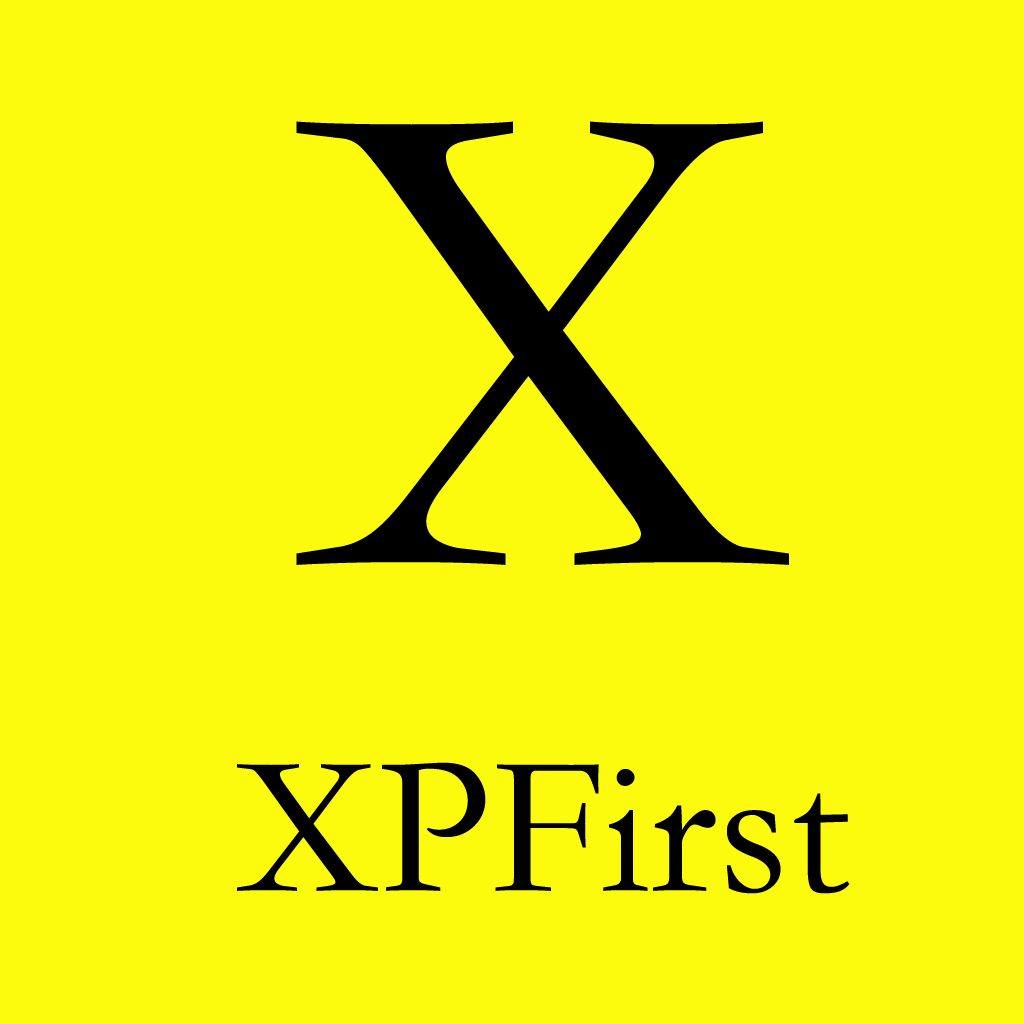
<style>
.page{position:relative;width:1024px;height:1024px;background:#fcfa0d}
.page>*{position:absolute;margin:0}
.t1{font:700px "STFangsong";color:#000000}
.t2{font:200px "STFangsong";color:#000000}
</style>
<div class="page">
<p class="t1" style="left:296px;top:121px;width:493px;height:444px">X</p>
<p class="t2" style="left:237px;top:762px;width:613px;height:132px">XPFirst</p>
</div>
